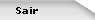
<style>
.page{position:relative;width:95px;height:20px}
.page>*{position:absolute;margin:0}
.t1{font:10px "Verdana-Bold";letter-spacing:0.025em;color:#000000}
</style>
<div class="page">
<p class="t1" style="left:16px;top:7px;width:22px;height:7px">Sair</p>
</div>
